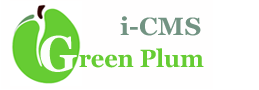
<style>
.page{position:relative;width:259px;height:90px;background:#fffefe}
.page>*{position:absolute;margin:0}
.t1{font:24.6px "Vani-Bold";color:#729382;scale:1.06 1}
.t2{font:49.7px "Vani-Bold";color:#fcfefb;scale:0.94 1}
.t3{font:24.8px "Vani-Bold";color:#66cc33;scale:0.94 1}
</style>
<div class="page">
<p class="t1" style="left:120px;top:16px;width:81px;height:20px">i-CMS</p>
<p class="t2" style="left:40px;top:35px;width:37px;height:37px">G</p>
<p class="t3" style="left:79px;top:48px;width:125px;height:20px"><span class="t2"> </span>reen Plum</p>
</div>
